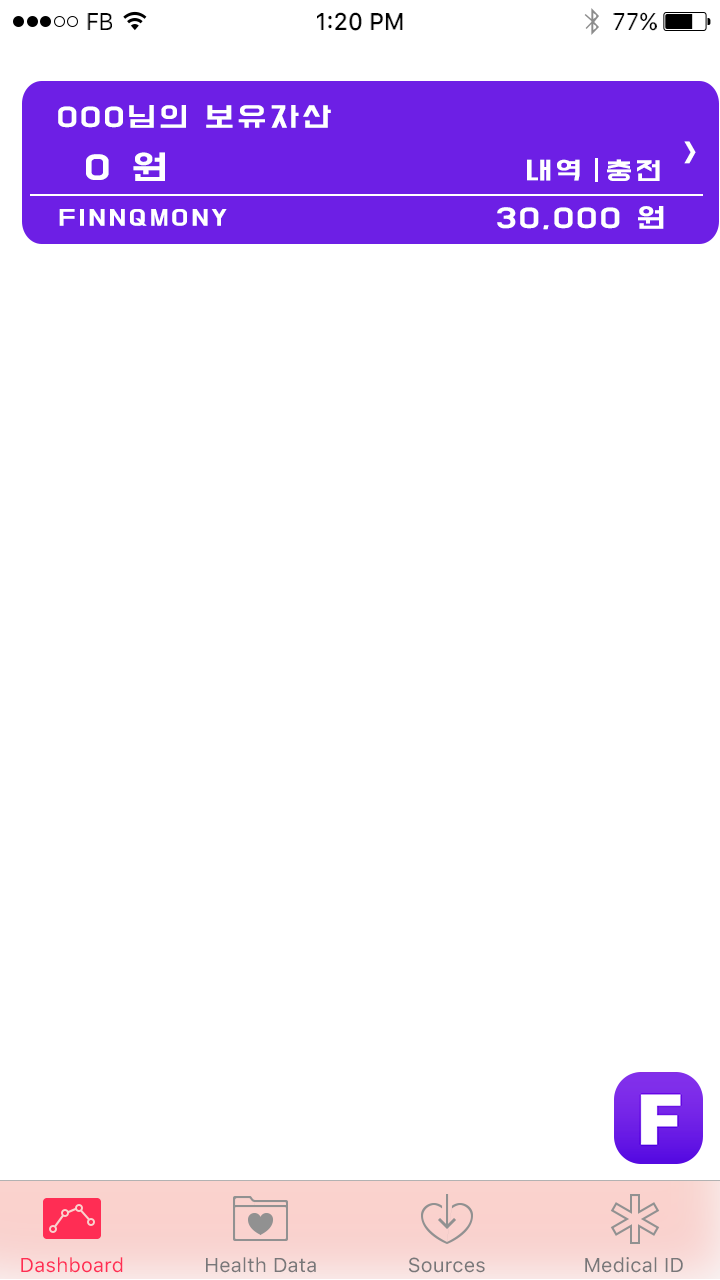
<style>
.page{position:relative;width:720px;height:1280px;background:#ffffff}
.page>*{position:absolute;margin:0}
.t1{font:24px "SFUIText-Regular";letter-spacing:-0.025em;color:#000000;scale:0.96 1}
.t2{font:24px "SFUIText-Medium";color:#000000;scale:0.96 1}
.t3{font:24px "SFUIText-Regular";color:#000000;scale:0.96 1}
.t4{font:24px "BMDoHyeon";letter-spacing:0.1em;color:#ffffff;scale:1.27 1}
.t5{font:30px "BMDoHyeon";letter-spacing:0.1em;color:#ffffff;scale:1.27 1}
.t6{font:22px "BMDoHyeon";letter-spacing:0.1em;color:#ffffff;scale:1.27 1}
.t7{font:19.8px "BMDoHyeon";letter-spacing:0.1em;color:#ffffff;scale:1.26 1}
.t8{font:20px "SFUIText-Regular";letter-spacing:0.01em;color:#ff2d54}
.t9{font:20px "SFUIText-Regular";letter-spacing:0.01em;color:#787779}
</style>
<div class="page">
<p class="t1" style="left:87px;top:13px;width:25px;height:17px">FB</p>
<p class="t2" style="left:317px;top:12px;width:86px;height:19px">1:20 PM</p>
<p class="t3" style="left:613px;top:12px;width:44px;height:19px">77%</p>
<p class="t4" style="left:58px;top:105px;width:273px;height:23px">000님의 보유자산</p>
<p class="t4" style="left:684px;top:141px;width:12px;height:23px">&gt;</p>
<p class="t5" style="left:86px;top:152px;width:79px;height:29px">0 원</p>
<p class="t6" style="left:527px;top:159px;width:53px;height:22px">내역</p>
<p class="t6" style="left:607px;top:159px;width:53px;height:22px">충전</p>
<p class="t7" style="left:59px;top:209px;width:168px;height:17px">FINNQMONY</p>
<p class="t4" style="left:497px;top:206px;width:167px;height:24px">30,000 원</p>
<p class="t8" style="left:21px;top:1257px;width:102px;height:16px">Dashboard</p>
<p class="t9" style="left:206px;top:1257px;width:110px;height:16px">Health Data</p>
<p class="t9" style="left:409px;top:1257px;width:76px;height:16px">Sources</p>
<p class="t9" style="left:585px;top:1257px;width:98px;height:16px">Medical ID</p>
</div>
